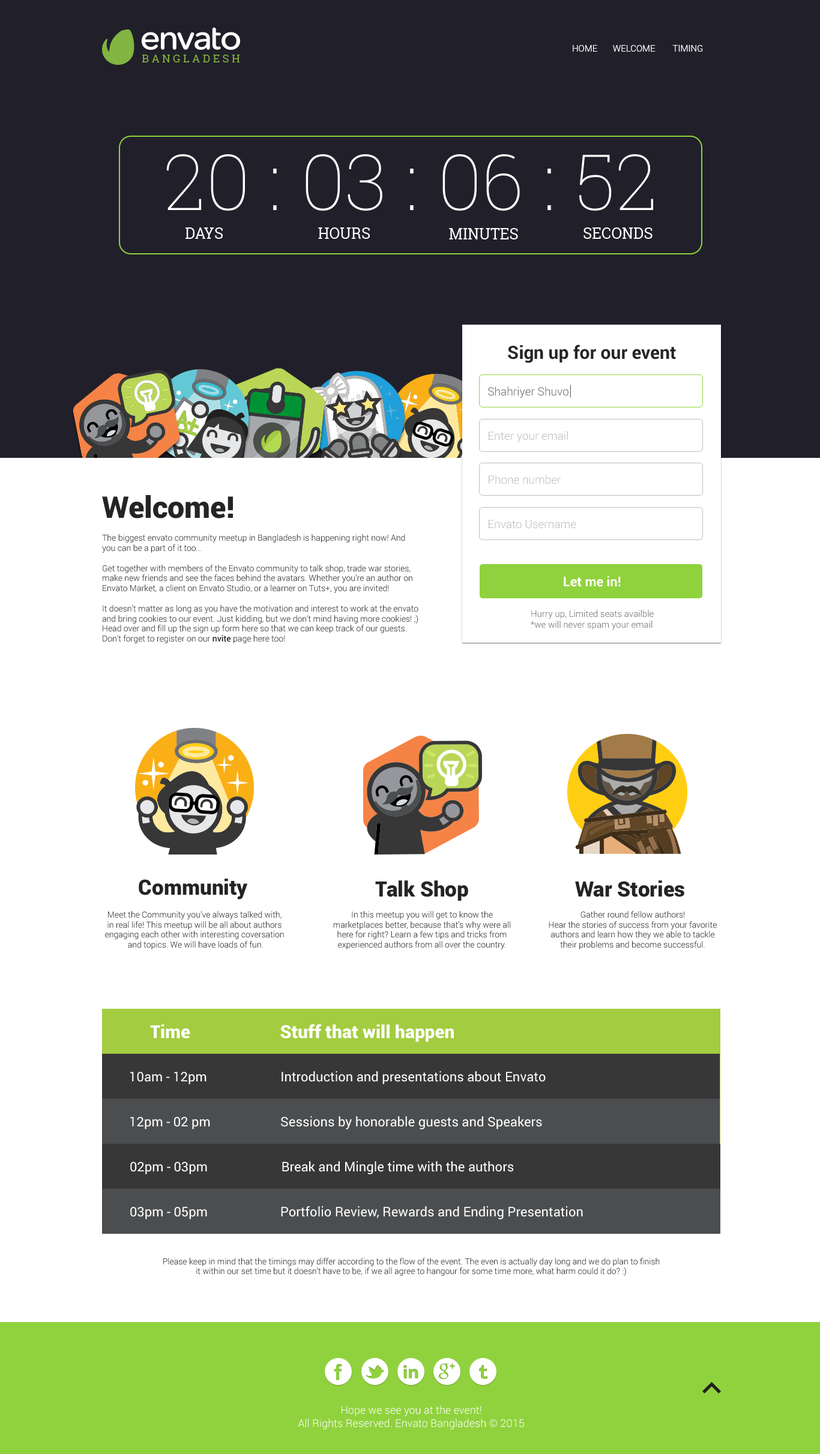
<style>
.page{position:relative;width:820px;height:1454px;background:#ffffff}
.page>*{position:absolute;margin:0}
.t1{font:9px "Roboto-Light";color:#ffffff;text-transform:uppercase}
.t2{font:10.8px "RobotoSlab-Regular";letter-spacing:0.25em;color:#82b541;text-transform:uppercase}
.t3{font:78px "RobotoSlab-Thin";color:#ffffff;text-transform:uppercase}
.t4{font:15px "RobotoSlab-Regular";color:#ffffff;text-transform:uppercase}
.t5{font:18px "Roboto-Bold";color:#252525}
.t6{font:11.4px "Roboto-Light";color:#6c6c6c}
.t7{font:15px "Roboto-Light";color:#6c6c6c}
.t8{font:11.4px "Roboto-Light";color:#bebebe}
.t9{font:30px "Roboto-Black";color:#242424}
.t10{font:8.4px "Roboto-Light";color:#242424}
.t11{font:8.4px "Roboto-Medium";color:#242424}
.t12{font:13.2px "Roboto-Bold";color:#ffffff}
.t13{font:9px "Roboto-Light";color:#6c6c6c}
.t14{font:21px "Roboto-Black";color:#242424}
.t15{font:18px "Roboto-Black";color:#ffffff}
.t16{font:13.2px "Roboto-Regular";color:#ffffff}
.t17{font:10.8px "Roboto-Light";color:#ffffff}
</style>
<div class="page">
<p class="t1" style="left:573px;top:45px;width:130px;height:7px">Home       Welcome        Timing</p>
<p class="t2" style="left:142px;top:55px;width:98px;height:7px">Bangladesh</p>
<p class="t3" style="left:166px;top:154px;width:488px;height:57px">20 : 03 : 06 : 52</p>
<p class="t4" style="left:185px;top:227px;width:38px;height:12px">Days</p>
<p class="t4" style="left:318px;top:227px;width:52px;height:12px">Hours</p>
<p class="t4" style="left:449px;top:228px;width:69px;height:11px">Minutes</p>
<p class="t4" style="left:583px;top:227px;width:69px;height:12px">Seconds</p>
<p class="t5" style="left:508px;top:345px;width:168px;height:18px">Sign up for our event</p>
<p class="t6" style="left:488px;top:385px;width:83px;height:13px">Shahriyer Shuvo<span class="t7">|</span></p>
<p class="t8" style="left:489px;top:431px;width:79px;height:11px">Enter your email</p>
<p class="t8" style="left:489px;top:475px;width:72px;height:9px">Phone number</p>
<p class="t9" style="left:102px;top:495px;width:131px;height:24px">Welcome!</p>
<p class="t8" style="left:489px;top:520px;width:87px;height:9px">Envato Username</p>
<p class="t10" style="left:102px;top:534px;width:316px;height:109px">The biggest envato community meetup in Bangladesh is happening right now! And you can be a part of it too...<br><br>Get together with members of the Envato community to talk shop, trade war stories, make new friends and see the faces behind the avatars. Whether you’re an author on Envato Market, a client on Envato Studio, or a learner on Tuts+, you are invited!<br><br>It doesn’t matter as long as you have the motivation and interest to work at the envato and bring cookies to our event. Just kidding, but we don’t mind having more cookies! ;)<br>Head over and fill up the sign up form here so that we can keep track of our guests. Don’t forget to register on our <span class="t11">nvite</span> page here too!</p>
<p class="t12" style="left:564px;top:576px;width:57px;height:11px">Let me in!</p>
<p class="t13" style="left:531px;top:610px;width:123px;height:20px">Hurry up, Limited seats availble<br>*we will never spam your email</p>
<p class="t14" style="left:139px;top:879px;width:109px;height:21px">Community</p>
<p class="t14" style="left:375px;top:881px;width:93px;height:20px">Talk Shop</p>
<p class="t14" style="left:575px;top:881px;width:109px;height:16px">War Stories</p>
<p class="t10" style="left:105px;top:911px;width:179px;height:39px;text-align:center">Meet the Community you’ve always talked with, in real life! This meetup will be all about authors engaging each other with interesting coversation<br> and topics. We will have loads of fun.</p>
<p class="t10" style="left:333px;top:911px;width:177px;height:39px;text-align:center">In this meetup you will get to know the marketplaces better, because that’s why were all here for right? Learn a few tips and tricks from experienced authors from all over the country.</p>
<p class="t10" style="left:549px;top:911px;width:168px;height:39px;text-align:center">Gather round fellow authors!<br>Hear the stories of success from your favorite authors and learn how they we able to tackle their problems and become successful.</p>
<p class="t15" style="left:150px;top:1025px;width:40px;height:14px">Time</p>
<p class="t15" style="left:280px;top:1024px;width:174px;height:18px">Stuff that will happen</p>
<p class="t16" style="left:130px;top:1072px;width:76px;height:13px">10am - 12pm</p>
<p class="t16" style="left:282px;top:1071px;width:264px;height:14px">Introduction and presentations about Envato</p>
<p class="t16" style="left:130px;top:1117px;width:80px;height:13px">12pm - 02 pm</p>
<p class="t16" style="left:281px;top:1116px;width:261px;height:14px">Sessions by honorable guests and Speakers</p>
<p class="t16" style="left:130px;top:1162px;width:77px;height:13px">02pm - 03pm</p>
<p class="t16" style="left:282px;top:1161px;width:232px;height:14px">Break and Mingle time with the authors</p>
<p class="t16" style="left:130px;top:1207px;width:77px;height:13px">03pm - 05pm</p>
<p class="t16" style="left:281px;top:1206px;width:302px;height:14px">Portfolio Review, Rewards and Ending Presentation</p>
<p class="t10" style="left:163px;top:1258px;width:497px;height:19px;text-align:center">Please keep in mind that the timings may differ according to the flow of the event. The even is actually day long and we do plan to finish it within our set time but it doesn’t have to be, if we all agree to hangour for some time more, what harm could it do? :)</p>
<p class="t17" style="left:298px;top:1406px;width:226px;height:24px;text-align:center">Hope we see you at the event!<br>All Rights Reserved. Envato Bangladesh © 2015</p>
</div>
